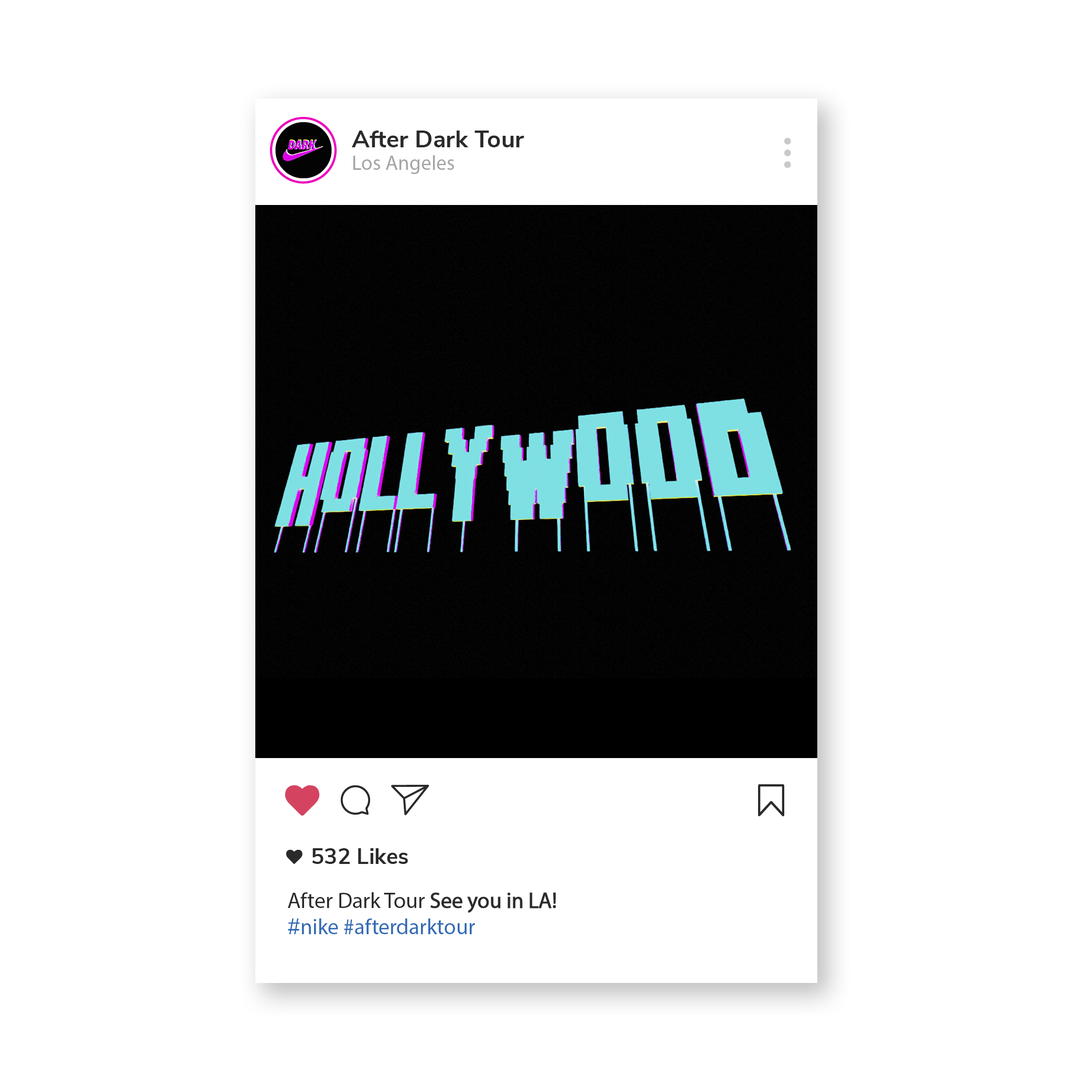
<style>
.page{position:relative;width:1092px;height:1092px;background:#ffffff}
.page>*{position:absolute;margin:0}
.t1{font:24px "NunitoSans-Bold";color:#2a2a2a}
.t2{font:20.7px "NunitoSans-Light";color:#a5a5a5}
.t3{font:22.1px "NunitoSans-Bold";color:#2a2a2a}
.t4{font:21.9px "NunitoSans-Light";color:#2a2a2a}
.t5{font:21.9px "NunitoSans-Regular";color:#356bb4}
</style>
<div class="page">
<p class="t1" style="left:352px;top:131px;width:172px;height:16px">After Dark Tour</p>
<p class="t2" style="left:353px;top:155px;width:101px;height:19px">Los Angeles</p>
<p class="t3" style="left:312px;top:848px;width:96px;height:16px">532 Likes</p>
<p class="t3" style="left:288px;top:892px;width:268px;height:42px">After Dark Tour <span class="t4">See you in LA!<br></span><span class="t5">#</span></p>
</div>
